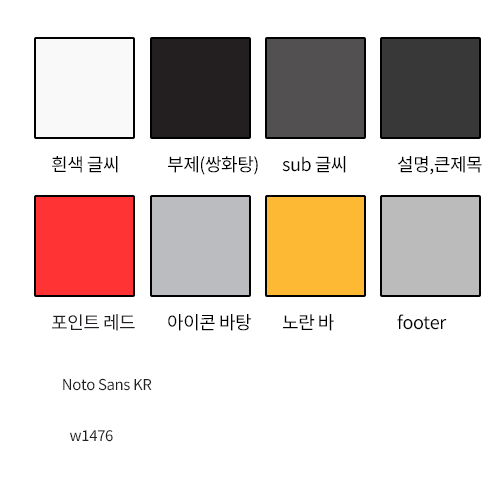
<style>
.page{position:relative;width:500px;height:500px;background:#ffffff}
.page>*{position:absolute;margin:0}
.t1{font:18px "NotoSansKR-Regular";letter-spacing:-0.025em;color:#000000}
.t2{font:18px "NotoSansKR-Regular";letter-spacing:-0.025em;color:#231f20}
.t3{font:15px "NotoSansKR-Regular";letter-spacing:-0.025em;color:#231f20}
</style>
<div class="page">
<p class="t1" style="left:52px;top:156px;width:66px;height:17px">흰색 글씨</p>
<p class="t1" style="left:168px;top:156px;width:90px;height:19px">부제(쌍화탕)</p>
<p class="t1" style="left:282px;top:156px;width:64px;height:17px">sub 글씨</p>
<p class="t1" style="left:398px;top:156px;width:84px;height:19px">설명,큰제목</p>
<p class="t2" style="left:52px;top:314px;width:83px;height:17px">포인트 레드</p>
<p class="t1" style="left:168px;top:314px;width:83px;height:17px">아이콘 바탕</p>
<p class="t1" style="left:283px;top:314px;width:51px;height:17px">노란 바</p>
<p class="t1" style="left:397px;top:314px;width:50px;height:16px">footer</p>
<p class="t3" style="left:63px;top:378px;width:89px;height:13px">Noto Sans KR</p>
<p class="t3" style="left:70px;top:430px;width:43px;height:12px">w1476</p>
</div>
